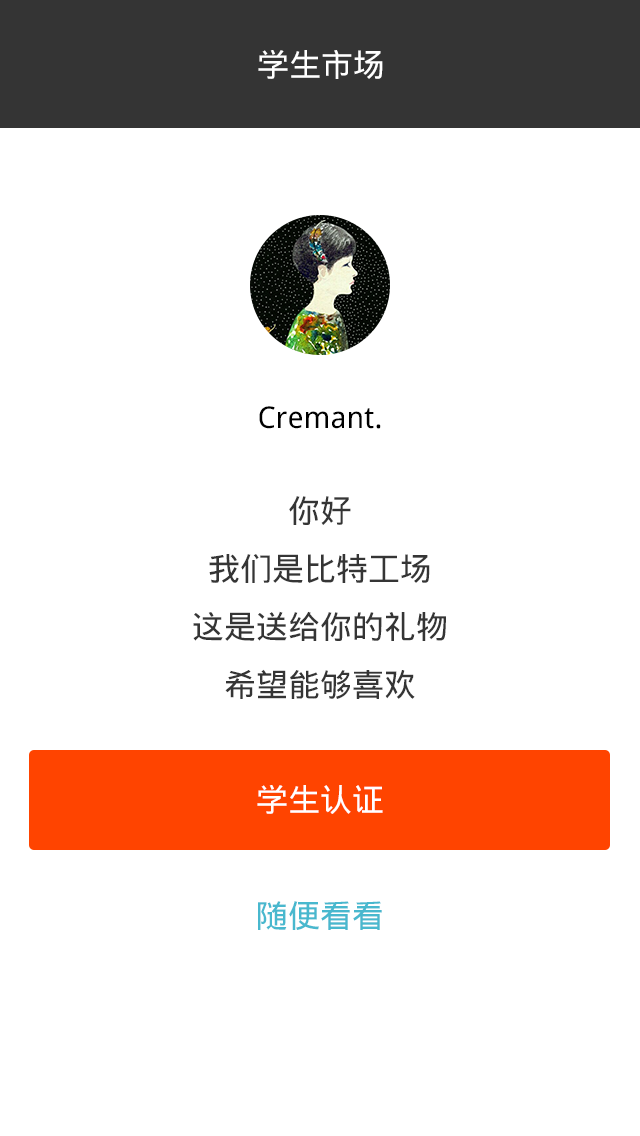
<style>
.page{position:relative;width:640px;height:1136px;background:#ffffff}
.page>*{position:absolute;margin:0}
.t1{font:32px "DroidSansFallback";color:#ffffff}
.t2{font:30px "DroidSansFallback";color:#000000}
.t3{font:32px/58px "DroidSansFallback";color:#353535}
.t4{font:32px "DroidSansFallback";color:#48b8ce}
</style>
<div class="page">
<p class="t1" style="left:258px;top:50px;width:125px;height:29px">学生市场</p>
<p class="t2" style="left:259px;top:406px;width:122px;height:23px">Cremant.</p>
<p class="t3" style="left:193px;top:496px;width:253px;height:203px;text-align:center">你好<br>我们是比特工场<br>这是送给你的礼物<br>希望能够喜欢</p>
<p class="t1" style="left:257px;top:785px;width:126px;height:29px">学生认证</p>
<p class="t4" style="left:258px;top:901px;width:124px;height:29px">随便看看</p>
</div>
